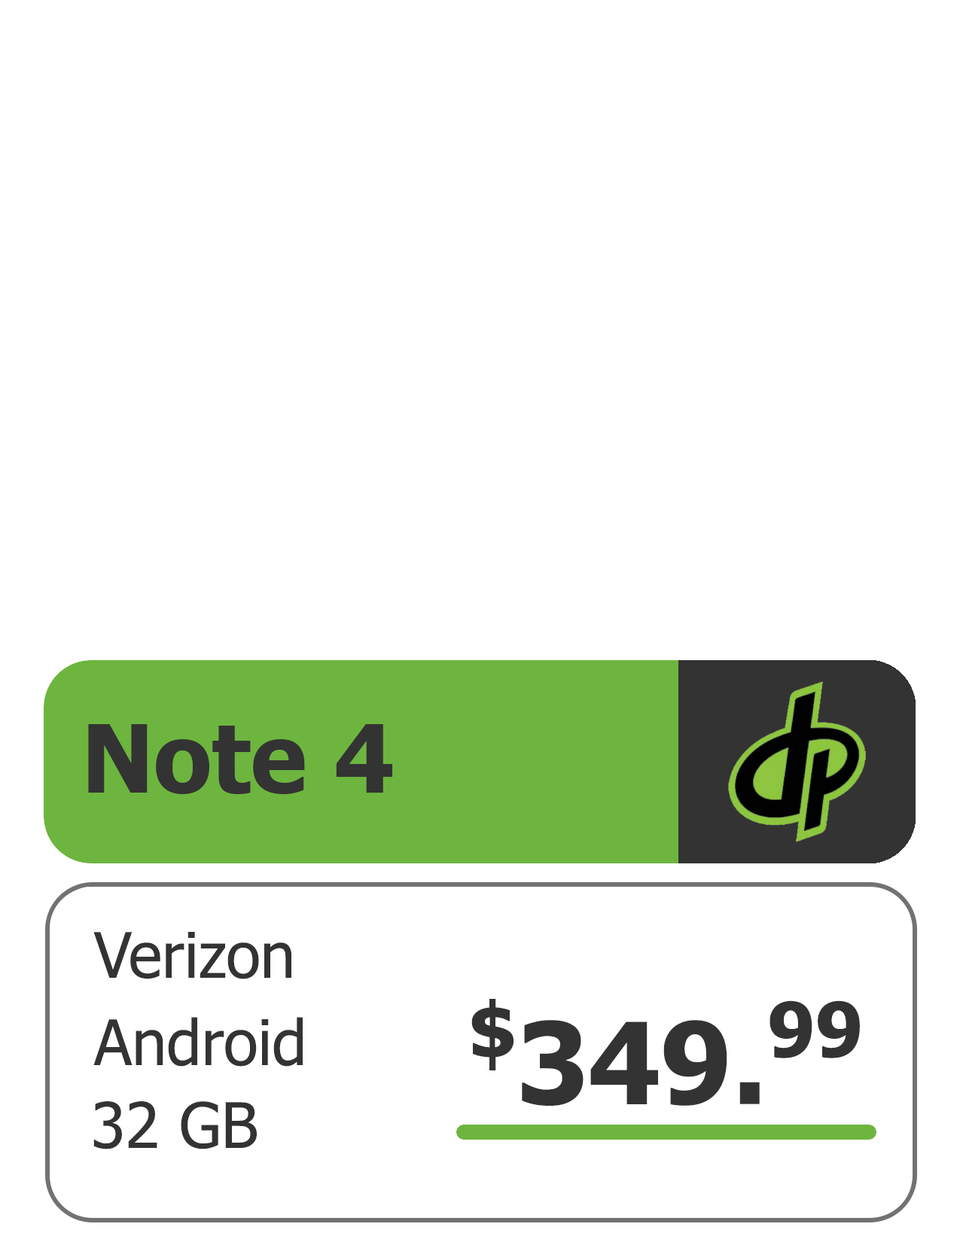
<style>
.page{position:relative;width:960px;height:1242px;background:#ffffff}
.page>*{position:absolute;margin:0}
.t1{font:94.1px "Tahoma-Bold";color:#333333}
.t2{font:62.7px "Tahoma";color:#333333}
.t3{font:112.9px "Tahoma-Bold";color:#333333}
.t4{font:75.3px "Tahoma-Bold";color:#333333}
</style>
<div class="page">
<p class="t1" style="left:88px;top:724px;width:305px;height:70px">Note 4</p>
<p class="t2" style="left:93px;top:932px;width:198px;height:47px">Verizon</p>
<p class="t3" style="left:471px;top:999px;width:389px;height:107px"><span class="t4">$</span>349.<span class="t4">99</span></p>
<p class="t2" style="left:93px;top:1017px;width:210px;height:50px">Android</p>
<p class="t2" style="left:93px;top:1101px;width:164px;height:49px">32 GB</p>
</div>
